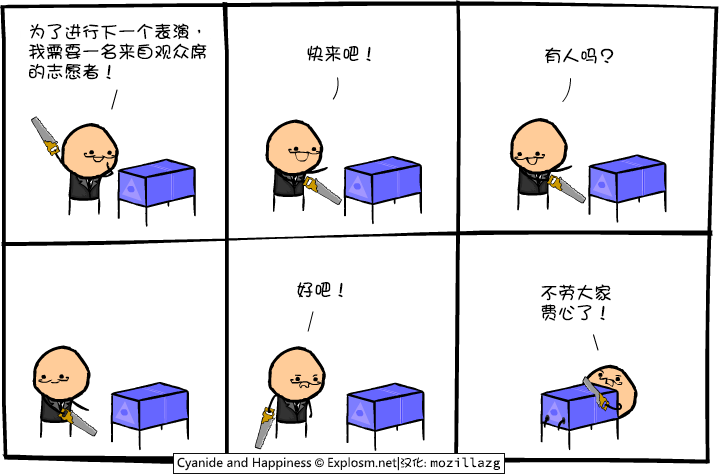
<style>
.page{position:relative;width:720px;height:475px;background:#ffffff}
.page>*{position:absolute;margin:0}
.t1{font:18px/20px "DFGirl";color:#000000}
.t2{font:18px "DFGirl";color:#000000}
</style>
<div class="page">
<p class="t1" style="left:28px;top:23px;width:179px;height:57px">为了进行下一个表演，<br>我需要一名来自观众席<br>的志愿者！</p>
<p class="t2" style="left:307px;top:45px;width:64px;height:17px">快来吧！</p>
<p class="t2" style="left:545px;top:47px;width:69px;height:17px">有人吗？</p>
<p class="t2" style="left:297px;top:282px;width:46px;height:16px">好吧！</p>
<p class="t1" style="left:541px;top:284px;width:70px;height:37px">不劳大家<br>费心了！</p>
</div>
